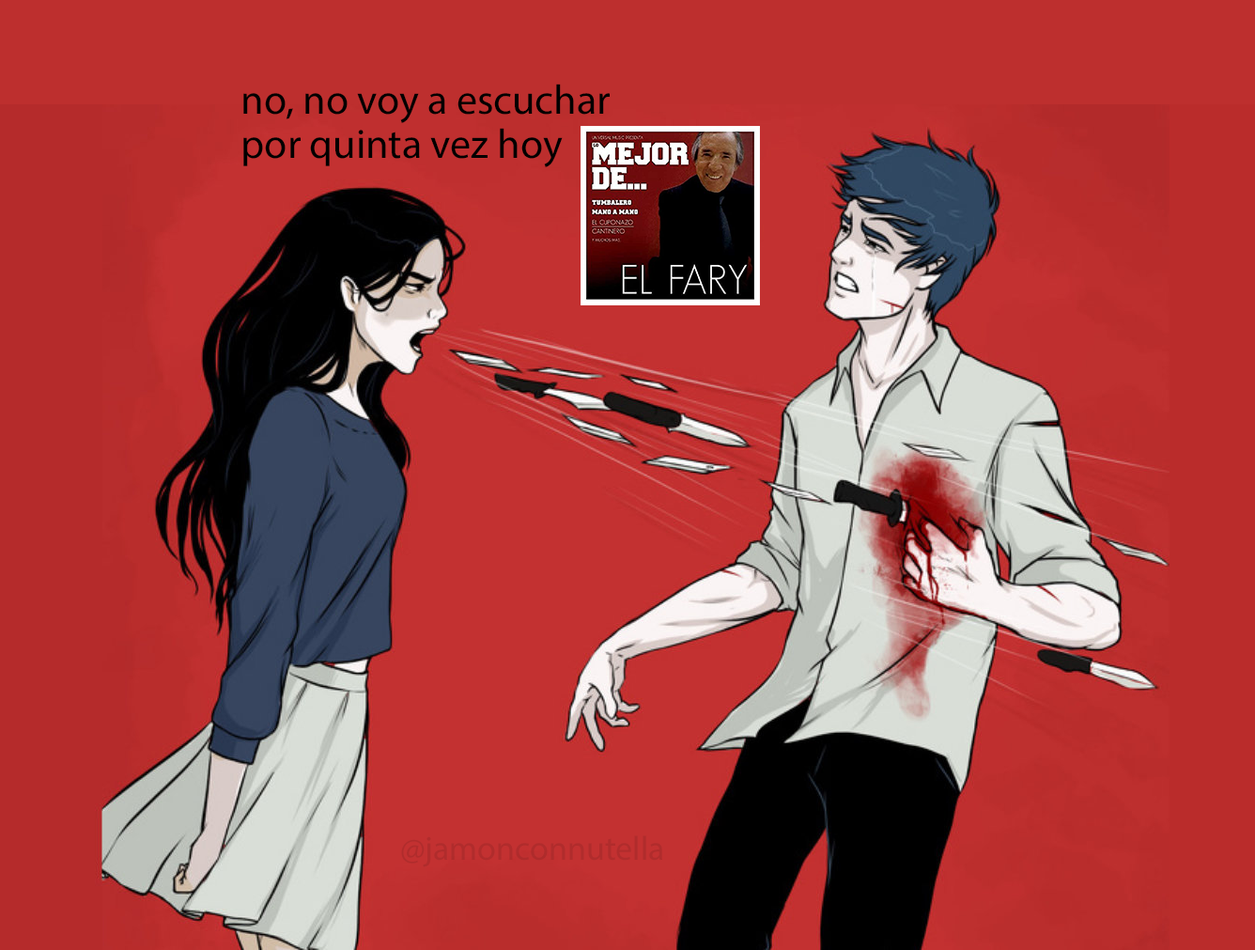
<style>
.page{position:relative;width:1255px;height:950px}
.page>*{position:absolute;margin:0}
.t1{font:41.4px "MyriadPro-Regular";color:#000000}
.t2{font:33.8px "MyriadPro-Regular";color:#b02c2c}
</style>
<div class="page">
<p class="t1" style="left:243px;top:84px;width:367px;height:83px">no, no voy a escuchar<br>por quinta vez hoy</p>
<p class="t2" style="left:401px;top:835px;width:261px;height:32px">@jamonconnutella</p>
</div>
